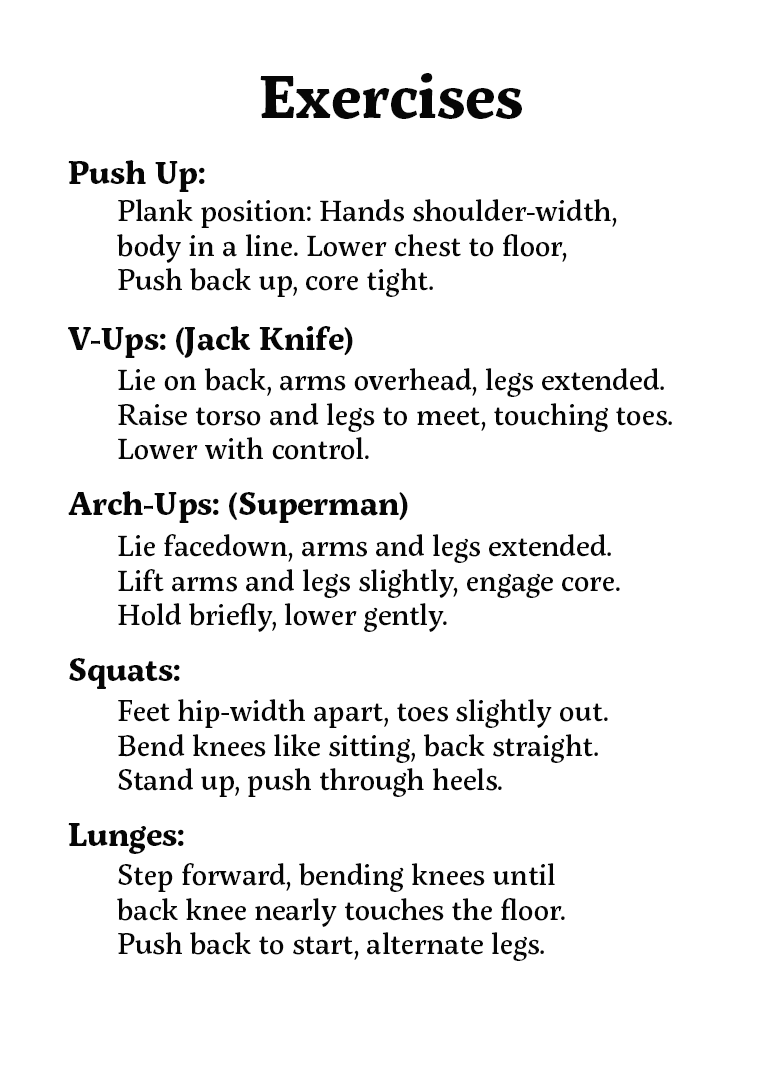
<style>
.page{position:relative;width:784px;height:1066px;background:#ffffff}
.page>*{position:absolute;margin:0}
.t1{font:60px "ServusSlab-Bold";color:#060606}
.t2{font:32px "ServusSlab-Bold";color:#060606}
.t3{font:29px "ServusSlab-Medium";color:#060606}
</style>
<div class="page">
<p class="t1" style="left:260px;top:73px;width:262px;height:46px">Exercises</p>
<p class="t2" style="left:68px;top:160px;width:137px;height:32px">Push Up:</p>
<p class="t3" style="left:117px;top:199px;width:500px;height:98px">Plank position: Hands shoulder-width,<br>body in a line. Lower chest to floor, <br>Push back up, core tight.</p>
<p class="t2" style="left:68px;top:326px;width:285px;height:32px">V-Ups: (Jack Knife)</p>
<p class="t3" style="left:118px;top:368px;width:554px;height:92px">Lie on back, arms overhead, legs extended.<br>Raise torso and legs to meet, touching toes.<br>Lower with control.</p>
<p class="t2" style="left:68px;top:491px;width:340px;height:32px">Arch-Ups: (Superman)</p>
<p class="t3" style="left:118px;top:534px;width:502px;height:98px">Lie facedown, arms and legs extended.<br>Lift arms and legs slightly, engage core.<br>Hold briefly, lower gently.</p>
<p class="t2" style="left:69px;top:658px;width:111px;height:31px">Squats:</p>
<p class="t3" style="left:118px;top:699px;width:490px;height:98px">Feet hip-width apart, toes slightly out.<br>Bend knees like sitting, back straight.<br>Stand up, push through heels.</p>
<p class="t2" style="left:68px;top:823px;width:116px;height:31px">Lunges:</p>
<p class="t3" style="left:117px;top:863px;width:448px;height:98px">Step forward, bending knees until<br>back knee nearly touches the floor.<br>Push back to start, alternate legs.</p>
</div>
